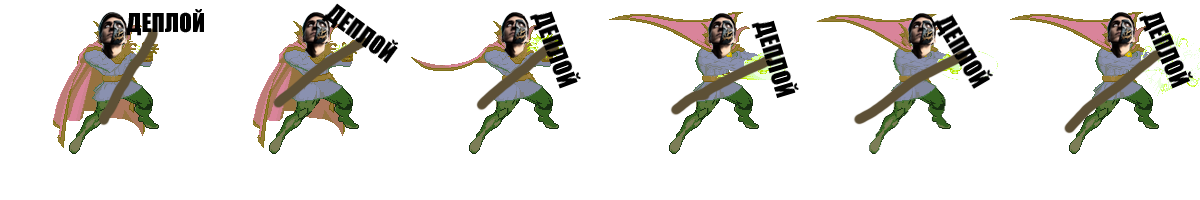
<style>
.page{position:relative;width:1200px;height:200px;background:#ffffff}
.page>*{position:absolute;margin:0}
.t1{font:24px "Impact";color:#000000}
</style>
<div class="page">
<p class="t1" style="left:126px;top:9px;width:78px;height:27px">ДЕПЛОЙ</p>
</div>
